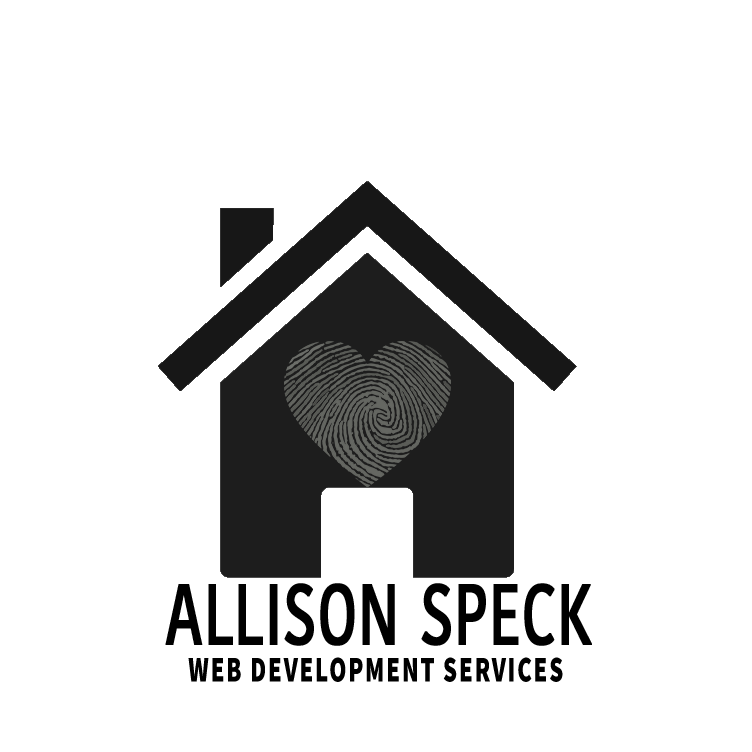
<style>
.page{position:relative;width:752px;height:752px;background:#ffffff}
.page>*{position:absolute;margin:0}
.t1{font:85.5px "KohinoorTelugu-Medium";color:#000000;text-transform:uppercase;font-weight:bold;scale:0.68 1}
.t2{font:36.2px "SourceSansRoman-Black";letter-spacing:0.075em;color:#000000;text-transform:uppercase;font-weight:bold;scale:0.68 1}
</style>
<div class="page">
<p class="t1" style="left:165px;top:583px;width:427px;height:63px">Allison Speck</p>
<p class="t2" style="left:188px;top:657px;width:375px;height:25px">web development Services</p>
</div>
